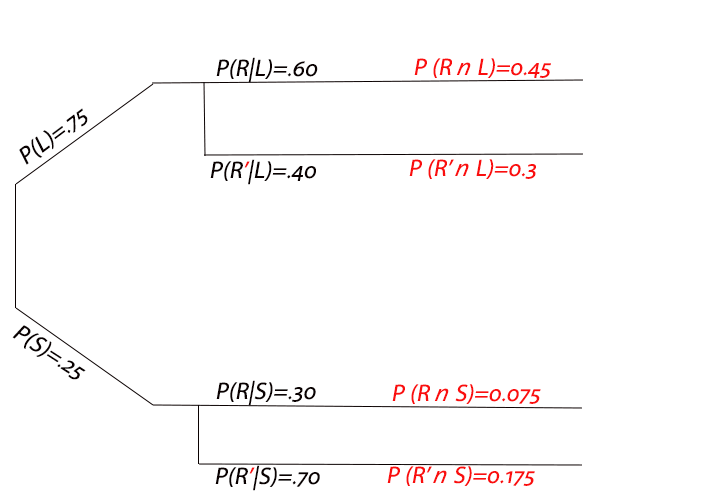
<style>
.page{position:relative;width:720px;height:500px;background:#ffffff}
.page>*{position:absolute;margin:0}
.t1{font:24px "MyriadPro-Regular";letter-spacing:0.005em;color:#0a0101;font-style:italic}
.t2{font:24px "MyriadPro-Regular";letter-spacing:0.005em;color:#fa0e0e;font-style:italic}
.t3{font:24px "SegoeUI-Italic";letter-spacing:0.005em;color:#fa0e0e;font-style:italic}
.t4{font:24px "MyriadPro-Regular";letter-spacing:0.005em;color:#f80f0f;font-style:italic}
</style>
<div class="page">
<p class="t1" style="left:216px;top:57px;width:102px;height:26px">P(R|L)=.60</p>
<p class="t2" style="left:414px;top:58px;width:137px;height:20px">P (R <span class="t3">n </span>L)=0.45</p>
<p class="t1" style="left:19px;top:108px;width:69px;height:57px;rotate:-37deg">P(L)=.75</p>
<p class="t1" style="left:210px;top:159px;width:106px;height:26px">P(R<span class="t4">’</span>|L)=.40</p>
<p class="t2" style="left:409px;top:159px;width:127px;height:20px">P (R’ <span class="t3">n </span>L)=0.3</p>
<p class="t1" style="left:12px;top:325px;width:74px;height:55px;rotate:33deg">P(S)=.25</p>
<p class="t1" style="left:216px;top:380px;width:100px;height:26px">P(R|S)=.30</p>
<p class="t2" style="left:392px;top:384px;width:149px;height:20px">P (R <span class="t3">n </span>S)=0.075</p>
<p class="t1" style="left:215px;top:465px;width:105px;height:26px">P(R<span class="t4">’</span>|S)=.70</p>
<p class="t2" style="left:387px;top:466px;width:148px;height:20px">P (R’ <span class="t3">n </span>S)=0.175</p>
</div>
